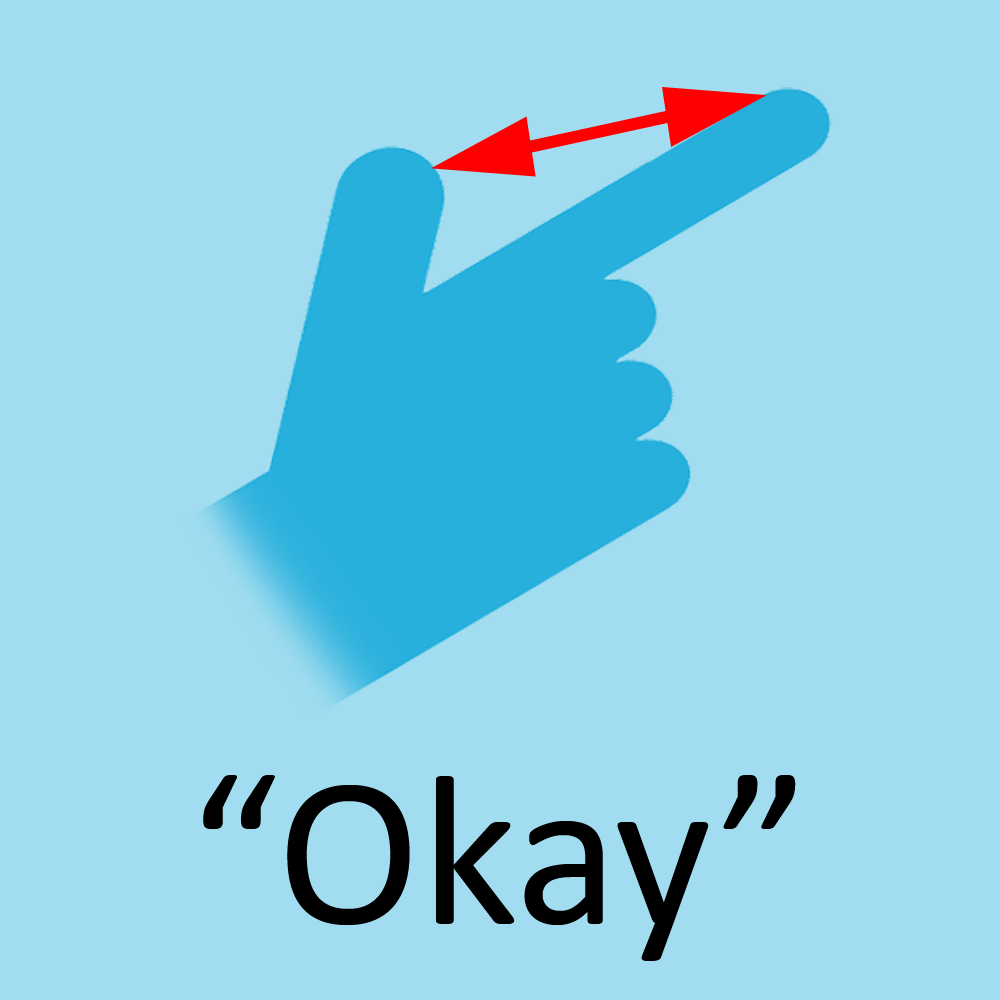
<style>
.page{position:relative;width:1000px;height:1000px;background:#a1dcf0}
.page>*{position:absolute;margin:0}
.t1{font:216.3px "Calibri";color:#000000}
</style>
<div class="page">
<p class="t1" style="left:203px;top:775px;width:593px;height:186px">“Okay”</p>
</div>
